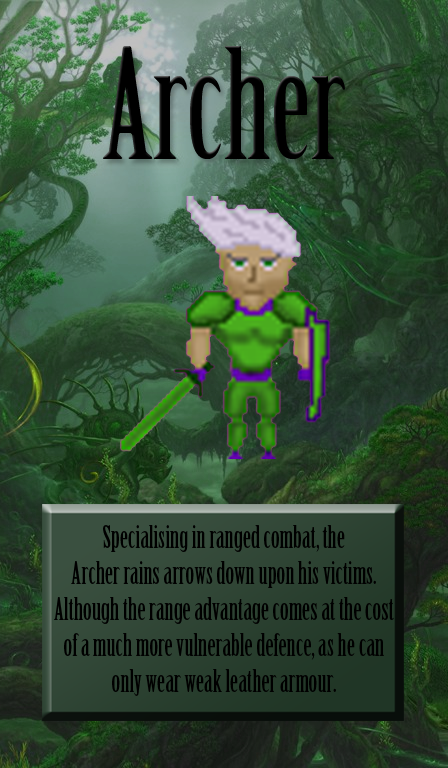
<style>
.page{position:relative;width:448px;height:768px}
.page>*{position:absolute;margin:0}
.t1{font:150px "BirchStd";color:#000000}
.t2{font:30px "BirchStd";color:#000000}
</style>
<div class="page">
<p class="t1" style="left:103px;top:46px;width:242px;height:113px">Archer</p>
<p class="t2" style="left:54px;top:525px;width:340px;height:171px;text-align:center">Specialising in ranged combat, the <br>Archer rains arrows down upon his victims.<br>Although the range advantage comes at the cost<br>of a much more vulnerable defence, as he can only wear weak leather armour.</p>
</div>
